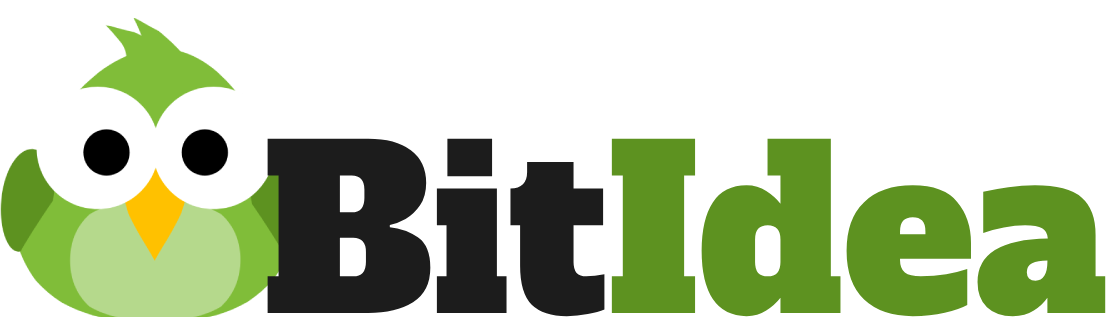
<style>
.page{position:relative;width:1112px;height:317px;background:#ffffff}
.page>*{position:absolute;margin:0}
.t1{font:223.9px "AlfaSlabOne-Regular";color:#5d9220}
.t2{font:223.9px "AlfaSlabOne-Regular";color:#1c1c1c}
</style>
<div class="page">
<p class="t1" style="left:267px;top:138px;width:839px;height:179px"><span class="t2">Bit</span>Idea</p>
</div>
